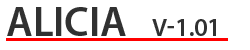
<style>
.page{position:relative;width:250px;height:50px;background:#ffffff}
.page>*{position:absolute;margin:0}
.t1{font:41.7px "MyriadPro-Semibold";color:#313131;text-transform:uppercase}
.t2{font:25px "MyriadPro-Semibold";color:#313131;text-transform:uppercase}
</style>
<div class="page">
<p class="t1" style="left:7px;top:7px;width:209px;height:29px">ALICIA   <span class="t2">v-1.01</span></p>
</div>
